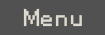
<style>
.page{position:relative;width:105px;height:35px;background:#525152}
.page>*{position:absolute;margin:0}
.t1{font:34px "HelvetiPixel";color:#dedbce}
</style>
<div class="page">
<p class="t1" style="left:23px;top:8px;width:59px;height:19px">Menu</p>
</div>
